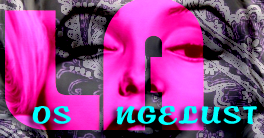
<style>
.page{position:relative;width:264px;height:138px}
.page>*{position:absolute;margin:0}
.t1{font:187.6px "Bauhaus-Heavy-Bold";letter-spacing:0.04em;scale:1.38 1}
.t2{font:21.8px "Brody";letter-spacing:0.04em;color:#00ffff;scale:1.63 1}
</style>
<div class="page">
<p class="t1" style="left:5px;top:10px;width:95px;height:120px">L</p>
<p class="t2" style="left:32px;top:105px;width:225px;height:20px">OS    NGELUST</p>
</div>
